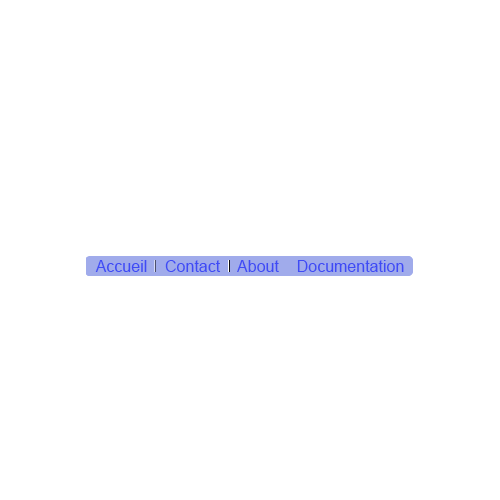
<style>
.page{position:relative;width:500px;height:500px;background:#ffffff}
.page>*{position:absolute;margin:0}
.t1{font:16px "ArialMT";color:#3f4bf5}
</style>
<div class="page">
<p class="t1" style="left:95px;top:260px;width:309px;height:12px">Accueil    Contact    About    Documentation</p>
<p class="t1" style="left:95px;top:260px;width:309px;height:12px">Accueil    Contact    About    Documentation</p>
</div>
